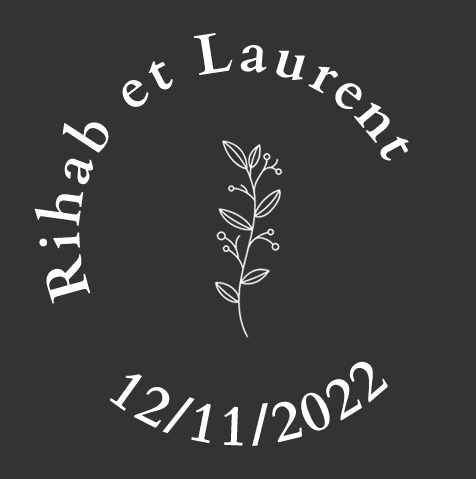
<style>
.page{position:relative;width:476px;height:479px;background:#333333}
.page>*{position:absolute;margin:0}
.t1{font:57px "Cardo-Bold";letter-spacing:0.075em;color:#ffffff}
</style>
<div class="page">
<p class="t1" style="left:34px;top:32px;width:375px;height:272px;rotate:-23deg">Rihab et Laurent</p>
<p class="t1" style="left:109px;top:361px;width:279px;height:85px;rotate:38deg">12/11/2022</p>
</div>
